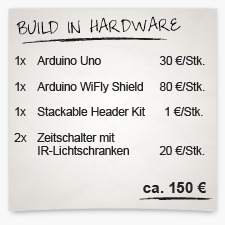
<style>
.page{position:relative;width:225px;height:225px}
.page>*{position:absolute;margin:0}
.t1{font:18px "ThrowMyHandsUpintheAir";color:#000000}
.t2{font:18px "ThrowMyHandsUpintheAir";letter-spacing:0.08em;color:#000000}
.t3{font:18px "ThrowMyHandsUpintheAir";letter-spacing:-0.14em;color:#000000}
.t4{font:11.6px/12.9px "ArialMT";color:#222222}
.t5{font:11.6px "ArialMT";color:#222222}
.t6{font:15.4px/12.9px "Arial-BoldMT";color:#222222}
</style>
<div class="page">
<p class="t1" style="left:16px;top:16px;width:165px;height:19px;rotate:-1deg">B<span class="t2">UI</span><span class="t3">L</span>D IN HARDWARE</p>
<p class="t4" style="left:14px;top:56px;width:192px;height:137px"><span class="t5"><br></span>1x Arduino Uno     30 €/Stk.<br><br>1x Arduino WiFly Shield    80 €/Stk.<br><br>1x Stackable Header Kit      1 €/Stk.<br><br>2x Zeitschalter mit <br> IR-Lichtschranken    20 €/Stk.<br><br> <br>         <span class="t6">ca. 150 €</span></p>
</div>
